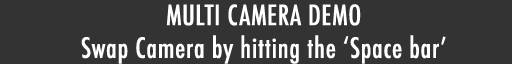
<style>
.page{position:relative;width:512px;height:64px;background:#333333}
.page>*{position:absolute;margin:0}
.t1{font:27.3px "Futura-CondensedMedium";color:#ffffff;font-weight:bold}
</style>
<div class="page">
<p class="t1" style="left:81px;top:4px;width:365px;height:60px;text-align:center">MULTI CAMERA DEMO<br>Swap Camera by hitting the ‘Space bar’</p>
</div>
